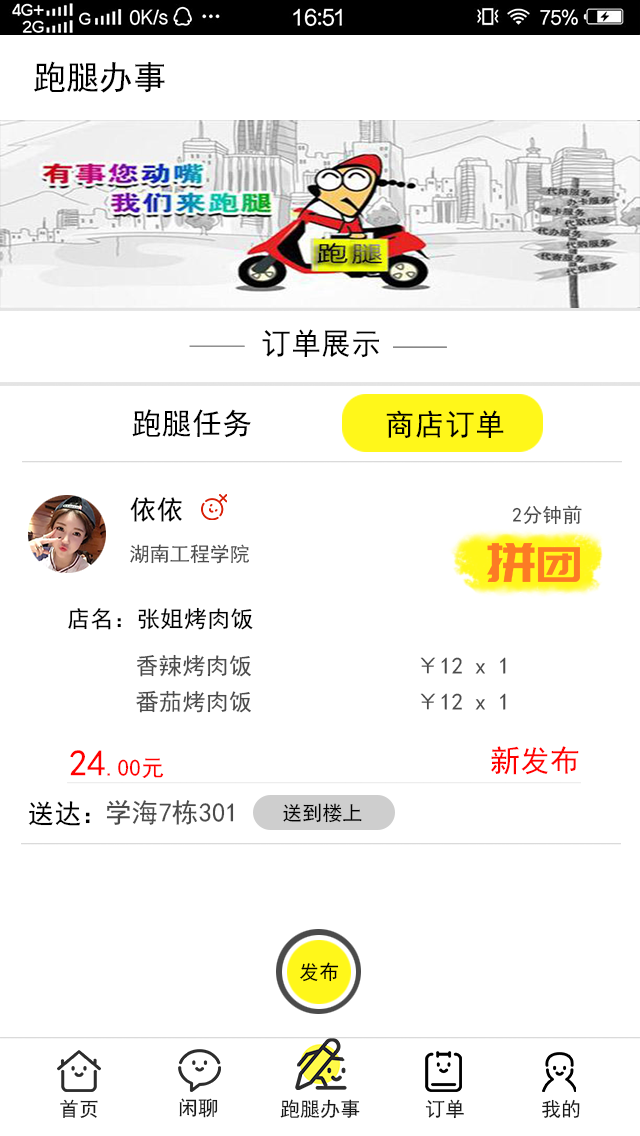
<style>
.page{position:relative;width:640px;height:1136px;background:#ffffff}
.page>*{position:absolute;margin:0}
.t1{font:33.3px "SimHei";letter-spacing:0.002em;color:#000000}
.t2{font:30px "SimHei";letter-spacing:0.002em;color:#010101}
.t3{font:30px "SimHei";letter-spacing:0.002em;color:#000000}
.t4{font:26.7px "SimHei";letter-spacing:0.002em;color:#010101}
.t5{font:12px "SimHei";letter-spacing:0.002em;color:#4b4b4b}
.t6{font:20px "SimHei";letter-spacing:0.002em;color:#4b4b4b}
.t7{font:23.3px "SimHei";letter-spacing:0.002em;color:#010101}
.t8{font:23.3px "SimHei";letter-spacing:0.002em;color:#4b4b4b}
.t9{font:23.3px "SimHei";letter-spacing:0.002em;color:#ff0000}
.t10{font:36.7px "SimHei";letter-spacing:0.002em;color:#ff0000}
.t11{font:30px "SimHei";letter-spacing:0.002em;color:#ff0000}
.t12{font:26.7px "SimHei";letter-spacing:0.002em;color:#000000}
.t13{font:26.7px "SimHei";letter-spacing:0.002em;color:#4b4b4b}
.t14{font:20px "SimHei";letter-spacing:0.002em;color:#010101}
.t15{font:12px "SimHei";letter-spacing:0.002em;color:#000000}
.t16{font:12px "SimHei";letter-spacing:0.002em;color:#181818}
</style>
<div class="page">
<p class="t1" style="left:34px;top:61px;width:131px;height:32px">跑腿办事</p>
<p class="t2" style="left:262px;top:329px;width:117px;height:29px">订单展示</p>
<p class="t3" style="left:132px;top:409px;width:119px;height:29px">跑腿任务</p>
<p class="t3" style="left:386px;top:410px;width:118px;height:29px">商店订单</p>
<p class="t4" style="left:130px;top:497px;width:52px;height:25px">依依</p>
<p class="t5" style="left:512px;top:505px;width:70px;height:20px">2分钟前</p>
<p class="t6" style="left:130px;top:544px;width:119px;height:20px">湖南工程学院</p>
<p class="t7" style="left:68px;top:607px;width:185px;height:23px">店名：张姐烤肉饭</p>
<p class="t8" style="left:137px;top:654px;width:369px;height:23px">香辣烤肉饭              ￥12 x 1</p>
<p class="t8" style="left:136px;top:690px;width:370px;height:23px">番茄烤肉饭              ￥12 x 1</p>
<p class="t9" style="left:70px;top:750px;width:94px;height:28px"><span class="t10">24</span>.00元</p>
<p class="t11" style="left:491px;top:746px;width:88px;height:29px">新发布</p>
<p class="t12" style="left:28px;top:801px;width:62px;height:25px">送达：</p>
<p class="t13" style="left:106px;top:800px;width:128px;height:25px">学海7栋301</p>
<p class="t14" style="left:283px;top:803px;width:79px;height:20px">送到楼上</p>
<p class="t15" style="left:300px;top:962px;width:39px;height:20px">发布</p>
<p class="t16" style="left:60px;top:1099px;width:38px;height:19px">首页</p>
<p class="t16" style="left:179px;top:1098px;width:39px;height:20px">闲聊</p>
<p class="t16" style="left:280px;top:1099px;width:80px;height:20px">跑腿办事</p>
<p class="t16" style="left:425px;top:1099px;width:39px;height:20px">订单</p>
<p class="t16" style="left:542px;top:1099px;width:38px;height:19px">我的</p>
</div>
